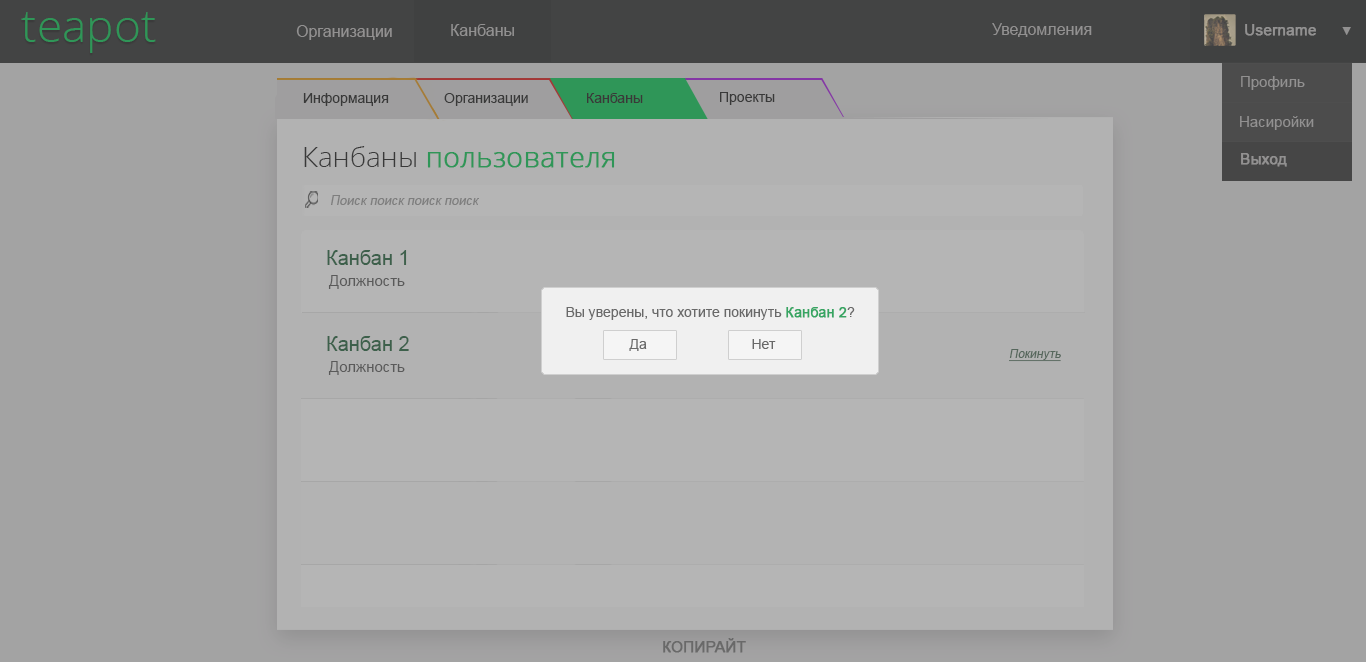
<style>
.page{position:relative;width:1366px;height:662px;background:#a3a3a3}
.page>*{position:absolute;margin:0}
.t1{font:46px "OpenSans-Light";color:#2f9658}
.t2{font:16px "ArialMT";color:#929191}
.t3{font:15px "ArialMT";color:#929191;font-weight:bold}
.t4{font:12.3px "ArialMT";color:#929191}
.t5{font:15px "ArialMT";color:#929191}
.t6{font:14px "ArialMT";color:#2e2e2e}
.t7{font:28px "OpenSans-Light";color:#2f9658;font-weight:bold}
.t8{font:28px "OpenSans-Light";color:#2f9658}
.t9{font:13px "ArialMT";color:#7e7e7e;font-style:italic}
.t10{font:20px "ArialMT";color:#336d4a}
.t11{font:15px "ArialMT";color:#626262}
.t12{font:14px "ArialMT";color:#696969}
.t13{font:14px "ArialMT";color:#36a562;font-weight:bold}
.t14{font:12px "ArialMT";color:#5c7766;font-style:italic;text-decoration:underline}
.t15{font:15px "ArialMT";color:#7b7a7a;font-weight:bold}
</style>
<div class="page">
<p class="t1" style="left:21px;top:12px;width:135px;height:41px">teapot</p>
<p class="t2" style="left:296px;top:25px;width:96px;height:15px">Организации</p>
<p class="t2" style="left:451px;top:24px;width:63px;height:12px">Канбаны</p>
<p class="t2" style="left:992px;top:23px;width:100px;height:14px">Уведомления</p>
<p class="t3" style="left:1245px;top:24px;width:71px;height:12px">Username</p>
<p class="t4" style="left:1342px;top:27px;width:9px;height:8px">▼</p>
<p class="t5" style="left:1241px;top:76px;width:64px;height:14px">Профиль</p>
<p class="t6" style="left:303px;top:93px;width:86px;height:13px">Информация</p>
<p class="t6" style="left:444px;top:93px;width:84px;height:13px">Организации</p>
<p class="t6" style="left:587px;top:93px;width:56px;height:10px">Канбаны</p>
<p class="t6" style="left:720px;top:92px;width:55px;height:13px">Проекты</p>
<p class="t5" style="left:1240px;top:116px;width:74px;height:14px">Насиройки</p>
<p class="t7" style="left:304px;top:146px;width:311px;height:22px"><span class="t8">Канбаны </span>пользователя</p>
<p class="t3" style="left:1241px;top:153px;width:46px;height:14px">Выход</p>
<p class="t9" style="left:331px;top:195px;width:148px;height:10px">Поиск поиск поиск поиск</p>
<p class="t10" style="left:327px;top:250px;width:80px;height:15px">Канбан 1</p>
<p class="t11" style="left:328px;top:275px;width:77px;height:14px">Должность</p>
<p class="t12" style="left:566px;top:307px;width:289px;height:13px">Вы уверены, что хотите покинуть <span class="t13">Канбан 2</span>?</p>
<p class="t10" style="left:327px;top:336px;width:82px;height:15px">Канбан 2</p>
<p class="t12" style="left:629px;top:339px;width:18px;height:12px">Да</p>
<p class="t12" style="left:752px;top:339px;width:24px;height:10px">Нет</p>
<p class="t14" style="left:1009px;top:349px;width:52px;height:13px">Покинуть</p>
<p class="t11" style="left:328px;top:361px;width:77px;height:14px">Должность</p>
<p class="t15" style="left:663px;top:638px;width:83px;height:15px">КОПИРАЙТ</p>
</div>
